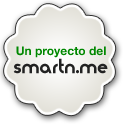
<style>
.page{position:relative;width:128px;height:128px;background:#ffffff}
.page>*{position:absolute;margin:0}
.t1{font:12px "HelveticaNeue-Bold";color:#008800}
.t2{font:18px "Moderna";color:#222222}
</style>
<div class="page">
<p class="t1" style="left:16px;top:46px;width:90px;height:12px">Un proyecto del</p>
<p class="t2" style="left:13px;top:58px;width:95px;height:16px">smartn.me</p>
</div>
